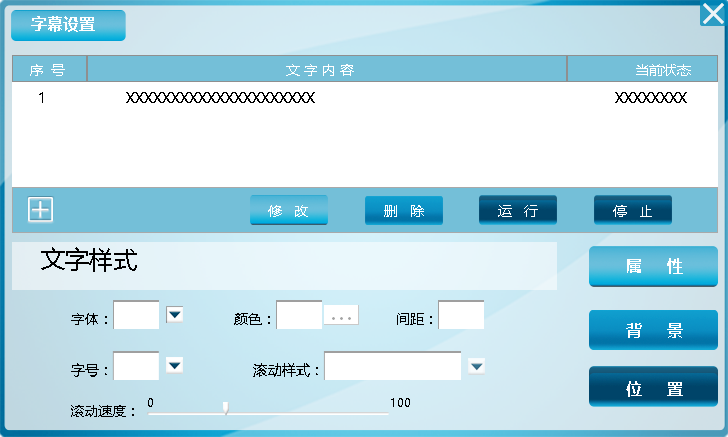
<style>
.page{position:relative;width:728px;height:437px;background:#ffffff}
.page>*{position:absolute;margin:0}
.t1{font:16px "MicrosoftYaHeiUI-Bold";color:#ffffff}
.t2{font:14px "MicrosoftYaHeiUI";color:#ffffff}
.t3{font:14px "MicrosoftYaHeiUI";color:#000000}
.t4{font:24px "MicrosoftYaHeiUI";color:#000000}
.t5{font:12px "MicrosoftYaHeiUI";color:#000000}
</style>
<div class="page">
<p class="t1" style="left:31px;top:16px;width:64px;height:16px">字幕设置</p>
<p class="t2" style="left:30px;top:64px;width:35px;height:12px">序  号</p>
<p class="t2" style="left:286px;top:64px;width:68px;height:12px">文 字 内 容</p>
<p class="t2" style="left:636px;top:64px;width:55px;height:12px">当前状态</p>
<p class="t3" style="left:39px;top:92px;width:648px;height:11px">1                    XXXXXXXXXXXXXXXXXXXXX                                                                           XXXXXXXX</p>
<p class="t2" style="left:268px;top:205px;width:40px;height:12px">修   改</p>
<p class="t2" style="left:384px;top:205px;width:40px;height:12px">删   除</p>
<p class="t2" style="left:498px;top:205px;width:40px;height:12px">运   行</p>
<p class="t2" style="left:613px;top:205px;width:39px;height:12px">停   止</p>
<p class="t4" style="left:41px;top:247px;width:96px;height:25px">文字样式</p>
<p class="t1" style="left:627px;top:258px;width:56px;height:16px">属     性</p>
<p class="t3" style="left:71px;top:313px;width:36px;height:12px">字体：</p>
<p class="t3" style="left:234px;top:313px;width:36px;height:12px">颜色：</p>
<p class="t3" style="left:397px;top:313px;width:35px;height:12px">间距：</p>
<p class="t1" style="left:626px;top:323px;width:57px;height:15px">背     景</p>
<p class="t3" style="left:71px;top:363px;width:36px;height:14px">字号：</p>
<p class="t3" style="left:253px;top:363px;width:65px;height:14px">滚动样式：</p>
<p class="t1" style="left:626px;top:381px;width:57px;height:16px">位     置</p>
<p class="t5" style="left:148px;top:398px;width:262px;height:9px">0                                                           100</p>
<p class="t3" style="left:71px;top:405px;width:63px;height:12px">滚动速度：</p>
</div>
